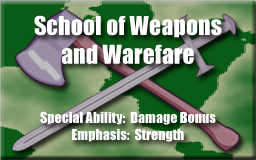
<style>
.page{position:relative;width:256px;height:160px}
.page>*{position:absolute;margin:0}
.t1{font:24px "Impact";color:#ffffff}
.t2{font:14px "Impact";color:#ffffff}
</style>
<div class="page">
<p class="t1" style="left:34px;top:15px;width:188px;height:49px;text-align:center">School of Weapons<br>and Warefare</p>
<p class="t2" style="left:40px;top:111px;width:176px;height:14px">Special Ability:  Damage Bonus</p>
<p class="t2" style="left:72px;top:128px;width:112px;height:14px">Emphasis:  Strength</p>
</div>
